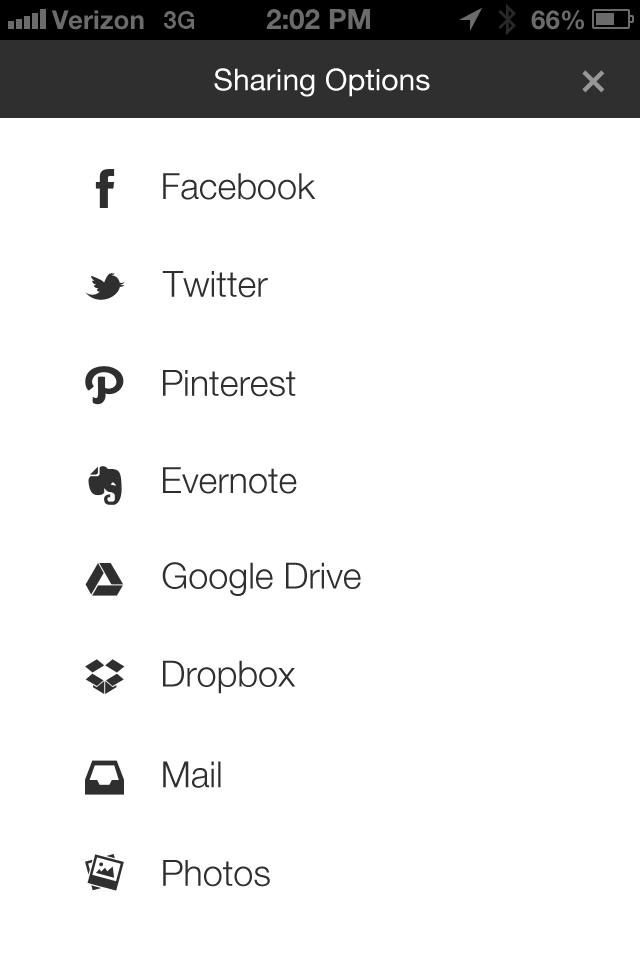
<style>
.page{position:relative;width:640px;height:960px;background:#ffffff}
.page>*{position:absolute;margin:0}
.t1{font:30px "HelveticaNeue";color:#ffffff}
.t2{font:36px "HelveticaNeue-Light";color:#2f2f2f}
</style>
<div class="page">
<p class="t1" style="left:214px;top:68px;width:216px;height:29px">Sharing Options</p>
<p class="t2" style="left:163px;top:173px;width:153px;height:27px">Facebook</p>
<p class="t2" style="left:162px;top:271px;width:106px;height:27px">Twitter</p>
<p class="t2" style="left:163px;top:370px;width:133px;height:27px">Pinterest</p>
<p class="t2" style="left:163px;top:467px;width:134px;height:27px">Evernote</p>
<p class="t2" style="left:162px;top:562px;width:199px;height:34px">Google Drive</p>
<p class="t2" style="left:163px;top:660px;width:133px;height:34px">Dropbox</p>
<p class="t2" style="left:163px;top:761px;width:58px;height:27px">Mail</p>
<p class="t2" style="left:163px;top:860px;width:107px;height:27px">Photos</p>
</div>
